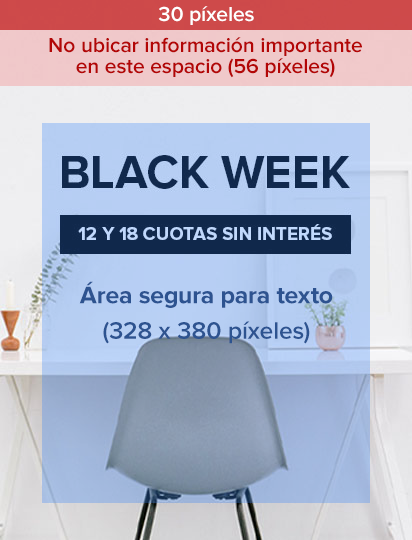
<style>
.page{position:relative;width:412px;height:540px}
.page>*{position:absolute;margin:0}
.t1{font:21.2px "ProximaNova-Semibold";color:#ffffff}
.t2{font:21.2px/21.2px "ProximaNova-Semibold";color:#b30606}
.t3{font:24.7px/35.3px "ProximaNova-Bold";color:#2d5390}
.t4{font:24.7px/35.3px "ProximaNova-Semibold";color:#2d5390}
</style>
<div class="page">
<p class="t1" style="left:158px;top:6px;width:96px;height:19px">30 píxeles</p>
<p class="t2" style="left:49px;top:37px;width:313px;height:41px;text-align:center">No ubicar información importante<br>en este espacio (56 píxeles)</p>
<p class="t3" style="left:79px;top:281px;width:254px;height:63px;text-align:center">Área segura para texto<br><span class="t4">(328 x 380 píxeles)</span></p>
</div>
